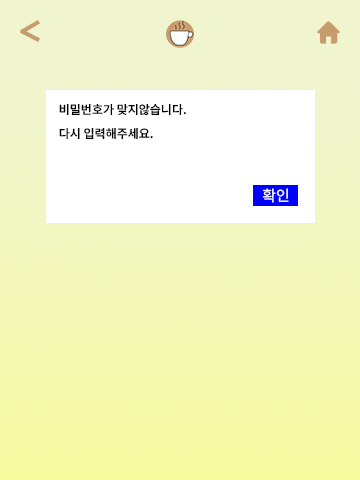
<style>
.page{position:relative;width:360px;height:480px;background:#ffffff}
.page>*{position:absolute;margin:0}
.t1{font:12px/24px "NotoSansKR-SemiBold";color:#000000}
.t2{font:14.8px "NotoSansKR-Regular";color:#ffffff}
</style>
<div class="page">
<p class="t1" style="left:59px;top:103px;width:127px;height:37px">비밀번호가 맞지않습니다.<br>다시 입력해주세요.</p>
<p class="t2" style="left:262px;top:188px;width:27px;height:15px">확인</p>
</div>
